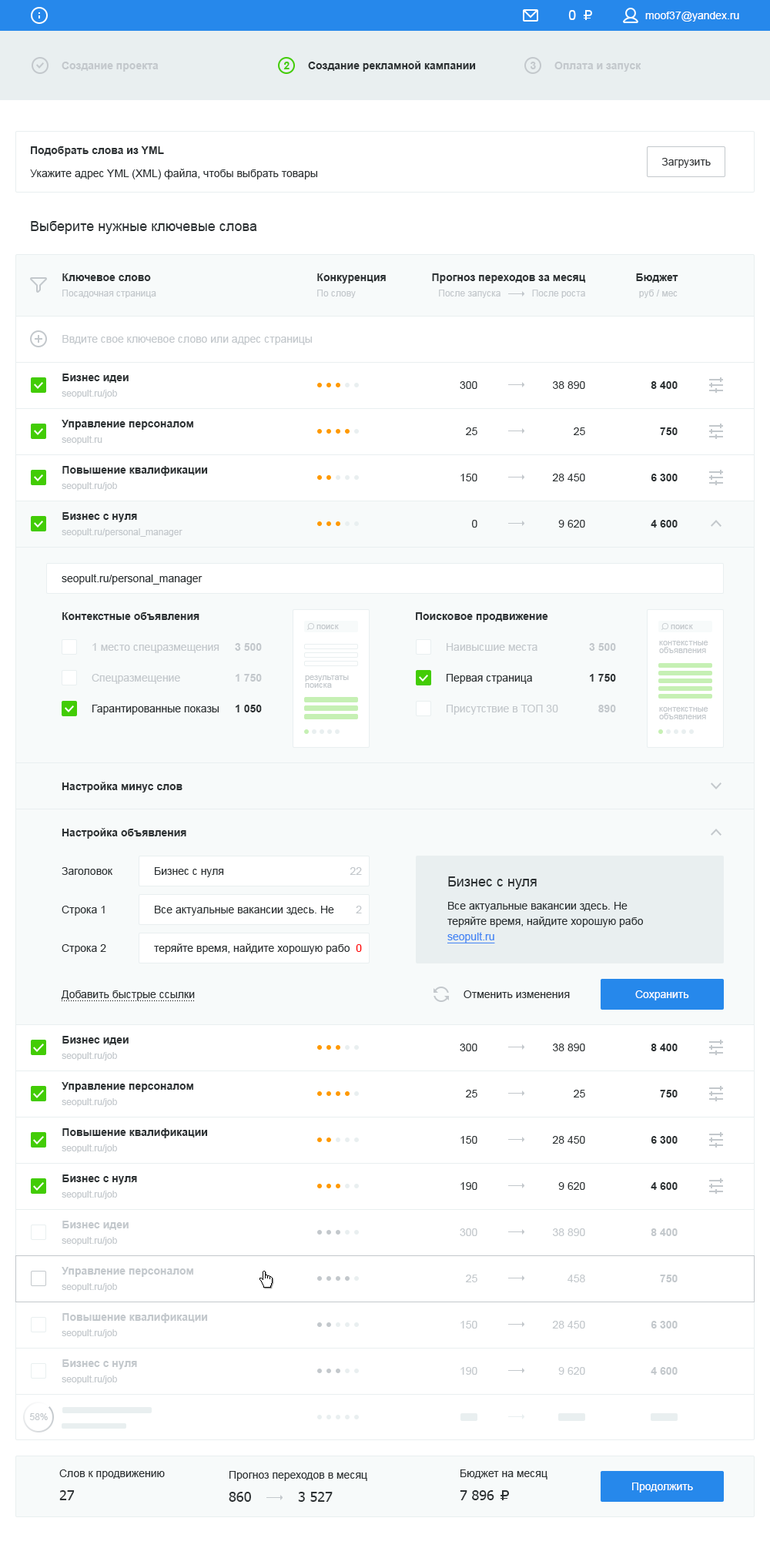
<style>
.page{position:relative;width:770px;height:1548px;background:#ffffff}
.page>*{position:absolute;margin:0}
.t1{font:13.9px "ArialMT";color:#ffffff}
.t2{font:10.8px "ArialMT";color:#ffffff}
.t3{font:10.8px "Arial-BoldMT";color:#c3c8cc}
.t4{font:10.8px "Arial-BoldMT";color:#42cc05}
.t5{font:10.8px "Arial-BoldMT";color:#2c3133}
.t6{font:10.8px "ArialMT";color:#313436}
.t7{font:10.8px "ArialMT";color:#2c3133}
.t8{font:13.9px "ArialMT";color:#2c3133}
.t9{font:9.2px "ArialMT";color:#c3c8cc}
.t10{font:10.8px "ArialMT";color:#c3c8cc}
.t11{font:8.5px "ArialMT";color:#c3c8cc}
.t12{font:8.5px/7.7px "ArialMT";color:#c3c8cc}
.t13{font:10.8px/30.8px "ArialMT";color:#c3c8cc}
.t14{font:10.8px/30.8px "ArialMT";color:#2c3133}
.t15{font:10.8px/30.8px "Arial-BoldMT";color:#c3c8cc}
.t16{font:10.8px/30.8px "Arial-BoldMT";color:#2c3133}
.t17{font:10.8px/15.4px "ArialMT";color:#2c3133}
.t18{font:10.8px "ArialMT";color:#4285f4;text-decoration:underline}
.t19{font:10.8px "ArialMT";color:#ff0000}
.t20{font:13.9px "Tahoma";color:#2c3133}
</style>
<div class="page">
<p class="t1" style="left:568px;top:10px;width:8px;height:10px">0</p>
<p class="t2" style="left:645px;top:12px;width:94px;height:10px">moof37@yandex.ru</p>
<p class="t3" style="left:62px;top:62px;width:97px;height:10px">Создание проекта</p>
<p class="t4" style="left:283px;top:62px;width:7px;height:7px">2</p>
<p class="t5" style="left:308px;top:61px;width:168px;height:11px">Создание рекламной кампании</p>
<p class="t3" style="left:531px;top:62px;width:5px;height:7px">3</p>
<p class="t3" style="left:555px;top:62px;width:87px;height:10px">Оплата и запуск</p>
<p class="t5" style="left:31px;top:146px;width:133px;height:10px">Подобрать слова из YML</p>
<p class="t6" style="left:662px;top:158px;width:49px;height:10px">Загрузить</p>
<p class="t7" style="left:30px;top:169px;width:287px;height:10px">Укажите адрес YML (XML) файла, чтобы выбрать товары</p>
<p class="t8" style="left:31px;top:221px;width:226px;height:13px">Выберите нужные ключевые слова</p>
<p class="t5" style="left:62px;top:273px;width:89px;height:8px">Ключевое слово</p>
<p class="t5" style="left:317px;top:273px;width:69px;height:10px">Конкуренция</p>
<p class="t5" style="left:432px;top:273px;width:154px;height:10px">Прогноз переходов за месяц</p>
<p class="t5" style="left:636px;top:273px;width:43px;height:10px">Бюджет</p>
<p class="t9" style="left:62px;top:290px;width:94px;height:8px">Посадочная страница</p>
<p class="t9" style="left:317px;top:290px;width:39px;height:8px">По слову</p>
<p class="t9" style="left:439px;top:290px;width:62px;height:8px">После запуска</p>
<p class="t9" style="left:532px;top:290px;width:53px;height:8px">После роста</p>
<p class="t9" style="left:639px;top:290px;width:39px;height:8px">руб / мес</p>
<p class="t10" style="left:62px;top:335px;width:250px;height:10px">Ввдите свое ключевое слово или адрес страницы</p>
<p class="t5" style="left:62px;top:374px;width:67px;height:9px">Бизнес идеи</p>
<p class="t9" style="left:62px;top:390px;width:55px;height:8px">seopult.ru/job</p>
<p class="t7" style="left:460px;top:381px;width:18px;height:8px">300</p>
<p class="t7" style="left:553px;top:381px;width:32px;height:8px">38 890</p>
<p class="t5" style="left:651px;top:381px;width:27px;height:8px">8 400</p>
<p class="t5" style="left:62px;top:420px;width:131px;height:10px">Управление персоналом</p>
<p class="t9" style="left:62px;top:436px;width:40px;height:8px">seopult.ru</p>
<p class="t7" style="left:466px;top:427px;width:12px;height:8px">25</p>
<p class="t7" style="left:574px;top:427px;width:11px;height:8px">25</p>
<p class="t5" style="left:660px;top:427px;width:18px;height:8px">750</p>
<p class="t5" style="left:62px;top:466px;width:146px;height:10px">Повышение квалификации</p>
<p class="t7" style="left:461px;top:474px;width:17px;height:7px">150</p>
<p class="t7" style="left:552px;top:474px;width:33px;height:7px">28 450</p>
<p class="t5" style="left:651px;top:474px;width:27px;height:7px">6 300</p>
<p class="t9" style="left:62px;top:482px;width:55px;height:9px">seopult.ru/job</p>
<p class="t5" style="left:62px;top:512px;width:75px;height:10px">Бизнес с нуля</p>
<p class="t7" style="left:472px;top:520px;width:6px;height:8px">0</p>
<p class="t7" style="left:558px;top:520px;width:27px;height:8px">9 620</p>
<p class="t5" style="left:651px;top:520px;width:27px;height:8px">4 600</p>
<p class="t9" style="left:62px;top:528px;width:121px;height:9px">seopult.ru/personal_manager</p>
<p class="t7" style="left:62px;top:574px;width:141px;height:11px">seopult.ru/personal_manager</p>
<p class="t5" style="left:62px;top:612px;width:137px;height:8px">Контекстные объявления</p>
<p class="t5" style="left:416px;top:612px;width:132px;height:10px">Поисковое продвижение</p>
<p class="t11" style="left:317px;top:625px;width:22px;height:4px">поиск</p>
<p class="t11" style="left:671px;top:625px;width:22px;height:4px">поиск</p>
<p class="t12" style="left:659px;top:641px;width:50px;height:12px">контекстные<br>объявления</p>
<p class="t13" style="left:92px;top:643px;width:128px;height:72px">1 место спецразмещения<br>Спецразмещение<br><span class="t14">Гарантированные показы</span></p>
<p class="t15" style="left:235px;top:643px;width:27px;height:69px;text-align:right">3 500<br>1 750<br><span class="t16">1 050</span></p>
<p class="t13" style="left:447px;top:643px;width:111px;height:72px">Наивысшие места<br><span class="t14">Первая страница<br></span>Присутствие в ТОП 30</p>
<p class="t15" style="left:589px;top:643px;width:27px;height:69px;text-align:right">3 500<br><span class="t16">1 750<br></span>890</p>
<p class="t12" style="left:305px;top:675px;width:44px;height:13px">результаты <br>поиска</p>
<p class="t12" style="left:659px;top:707px;width:50px;height:12px">контекстные<br>объявления</p>
<p class="t5" style="left:62px;top:782px;width:121px;height:11px">Настройка минус слов</p>
<p class="t5" style="left:62px;top:828px;width:124px;height:11px">Настройка объявления</p>
<p class="t7" style="left:62px;top:867px;width:50px;height:8px">Заголовок</p>
<p class="t7" style="left:155px;top:867px;width:69px;height:10px">Бизнес с нуля</p>
<p class="t10" style="left:350px;top:867px;width:12px;height:8px">22</p>
<p class="t8" style="left:448px;top:877px;width:89px;height:13px">Бизнес с нуля</p>
<p class="t7" style="left:62px;top:906px;width:43px;height:10px">Строка 1</p>
<p class="t7" style="left:155px;top:906px;width:179px;height:10px">Все актуальные вакансии здесь. Не</p>
<p class="t10" style="left:356px;top:906px;width:6px;height:7px">2</p>
<p class="t17" style="left:448px;top:902px;width:195px;height:25px">Все актуальные вакансии здесь. Не<br>теряйте время, найдите хорошую рабо</p>
<p class="t18" style="left:448px;top:932px;width:47px;height:12px">seopult.ru</p>
<p class="t7" style="left:62px;top:944px;width:44px;height:10px">Строка 2</p>
<p class="t7" style="left:154px;top:944px;width:196px;height:10px">теряйте время, найдите хорошую рабо</p>
<p class="t19" style="left:356px;top:944px;width:6px;height:8px">0</p>
<p class="t7" style="left:61px;top:991px;width:134px;height:10px">Добавить быстрые ссылки</p>
<p class="t7" style="left:464px;top:991px;width:106px;height:7px">Отменить изменения</p>
<p class="t2" style="left:635px;top:991px;width:54px;height:10px">Сохранить</p>
<p class="t5" style="left:62px;top:1036px;width:67px;height:9px">Бизнес идеи</p>
<p class="t7" style="left:460px;top:1044px;width:18px;height:7px">300</p>
<p class="t7" style="left:553px;top:1044px;width:32px;height:7px">38 890</p>
<p class="t5" style="left:651px;top:1044px;width:27px;height:7px">8 400</p>
<p class="t9" style="left:62px;top:1052px;width:55px;height:9px">seopult.ru/job</p>
<p class="t5" style="left:62px;top:1082px;width:131px;height:10px">Управление персоналом</p>
<p class="t7" style="left:466px;top:1090px;width:12px;height:8px">25</p>
<p class="t7" style="left:574px;top:1090px;width:11px;height:8px">25</p>
<p class="t5" style="left:660px;top:1090px;width:18px;height:8px">750</p>
<p class="t9" style="left:62px;top:1098px;width:55px;height:9px">seopult.ru/job</p>
<p class="t5" style="left:62px;top:1128px;width:146px;height:10px">Повышение квалификации</p>
<p class="t9" style="left:62px;top:1145px;width:55px;height:8px">seopult.ru/job</p>
<p class="t7" style="left:461px;top:1136px;width:17px;height:8px">150</p>
<p class="t7" style="left:552px;top:1136px;width:33px;height:8px">28 450</p>
<p class="t5" style="left:651px;top:1136px;width:27px;height:8px">6 300</p>
<p class="t5" style="left:62px;top:1175px;width:75px;height:10px">Бизнес с нуля</p>
<p class="t9" style="left:62px;top:1191px;width:55px;height:8px">seopult.ru/job</p>
<p class="t7" style="left:461px;top:1182px;width:17px;height:8px">190</p>
<p class="t7" style="left:558px;top:1182px;width:27px;height:8px">9 620</p>
<p class="t5" style="left:651px;top:1182px;width:27px;height:8px">4 600</p>
<p class="t3" style="left:62px;top:1221px;width:67px;height:9px">Бизнес идеи</p>
<p class="t10" style="left:460px;top:1229px;width:18px;height:7px">300</p>
<p class="t10" style="left:553px;top:1229px;width:32px;height:7px">38 890</p>
<p class="t3" style="left:651px;top:1229px;width:27px;height:7px">8 400</p>
<p class="t9" style="left:62px;top:1237px;width:55px;height:8px">seopult.ru/job</p>
<p class="t3" style="left:62px;top:1267px;width:131px;height:10px">Управление персоналом</p>
<p class="t10" style="left:466px;top:1275px;width:12px;height:7px">25</p>
<p class="t10" style="left:568px;top:1275px;width:17px;height:7px">458</p>
<p class="t3" style="left:660px;top:1275px;width:18px;height:7px">750</p>
<p class="t9" style="left:62px;top:1283px;width:55px;height:9px">seopult.ru/job</p>
<p class="t3" style="left:62px;top:1313px;width:146px;height:10px">Повышение квалификации</p>
<p class="t10" style="left:461px;top:1321px;width:17px;height:8px">150</p>
<p class="t10" style="left:552px;top:1321px;width:33px;height:8px">28 450</p>
<p class="t3" style="left:651px;top:1321px;width:27px;height:8px">6 300</p>
<p class="t9" style="left:62px;top:1329px;width:55px;height:9px">seopult.ru/job</p>
<p class="t3" style="left:62px;top:1359px;width:75px;height:10px">Бизнес с нуля</p>
<p class="t10" style="left:461px;top:1367px;width:17px;height:8px">190</p>
<p class="t10" style="left:558px;top:1367px;width:27px;height:8px">9 620</p>
<p class="t3" style="left:651px;top:1367px;width:27px;height:8px">4 600</p>
<p class="t9" style="left:62px;top:1376px;width:55px;height:8px">seopult.ru/job</p>
<p class="t9" style="left:29px;top:1413px;width:19px;height:7px">58%</p>
<p class="t7" style="left:59px;top:1470px;width:106px;height:10px">Слов к продвижению</p>
<p class="t7" style="left:461px;top:1470px;width:87px;height:10px">Бюджет на месяц</p>
<p class="t7" style="left:230px;top:1471px;width:137px;height:10px">Прогноз переходов в месяц</p>
<p class="t20" style="left:59px;top:1490px;width:16px;height:10px">27</p>
<p class="t20" style="left:229px;top:1492px;width:22px;height:10px">860</p>
<p class="t20" style="left:298px;top:1492px;width:35px;height:10px">3 527</p>
<p class="t20" style="left:460px;top:1490px;width:34px;height:10px">7 896</p>
<p class="t2" style="left:632px;top:1483px;width:61px;height:10px">Продолжить</p>
</div>
